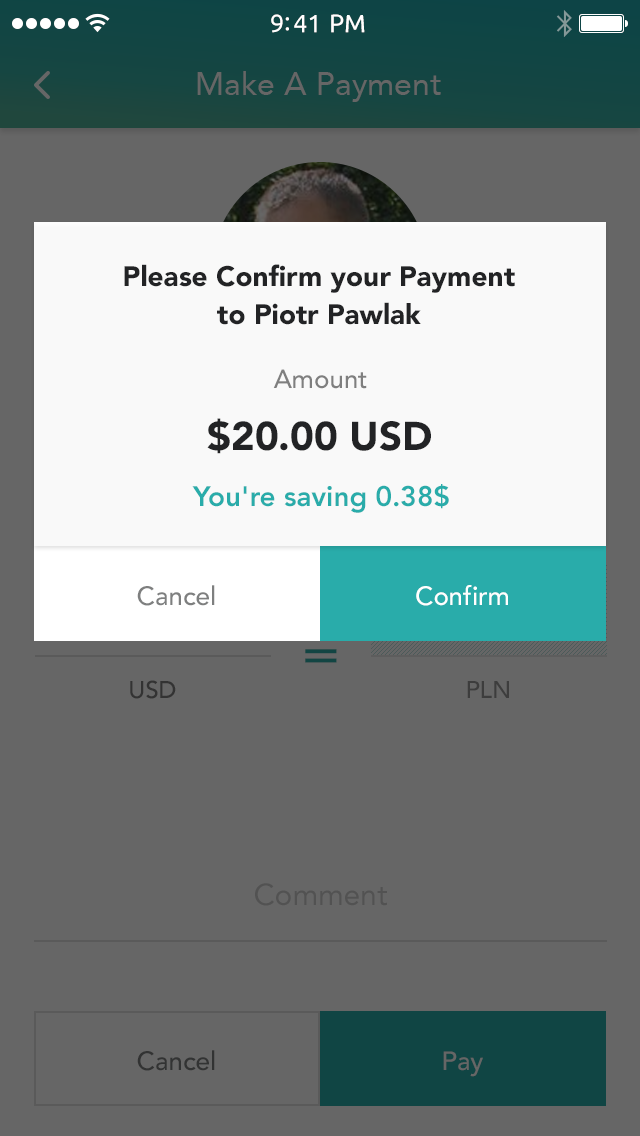
<style>
.page{position:relative;width:640px;height:1136px;background:#666666}
.page>*{position:absolute;margin:0}
.t1{font:25px "Ubuntu";color:#ffffff}
.t2{font:28px/38px "Avenir-Black";color:#222325}
.t3{font:26px "Avenir-Medium";color:#7f7f7f}
.t4{font:40px "Avenir-Black";color:#222325}
.t5{font:28px "Avenir-Heavy";color:#29acaa}
.t6{font:26px "Avenir-Medium";color:#7e7f7f}
.t7{font:26px "Avenir-Medium";color:#ffffff}
</style>
<div class="page">
<p class="t1" style="left:271px;top:14px;width:94px;height:19px">9:41 PM</p>
<p class="t2" style="left:124px;top:264px;width:391px;height:61px;text-align:center">Please Confirm your Payment<br>to Piotr Pawlak</p>
<p class="t3" style="left:273px;top:369px;width:94px;height:20px">Amount</p>
<p class="t4" style="left:207px;top:418px;width:224px;height:36px">$20.00 USD</p>
<p class="t5" style="left:192px;top:484px;width:257px;height:29px">You're saving 0.38$</p>
<p class="t6" style="left:137px;top:585px;width:78px;height:21px">Cancel</p>
<p class="t7" style="left:416px;top:585px;width:92px;height:21px">Confirm</p>
</div>
